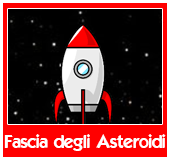
<style>
.page{position:relative;width:170px;height:160px;background:#000000}
.page>*{position:absolute;margin:0}
.t1{font:18px "ELEGANCE";color:#ffffff}
</style>
<div class="page">
<p class="t1" style="left:4px;top:134px;width:162px;height:17px">Fascia degli Asteroidi</p>
</div>
